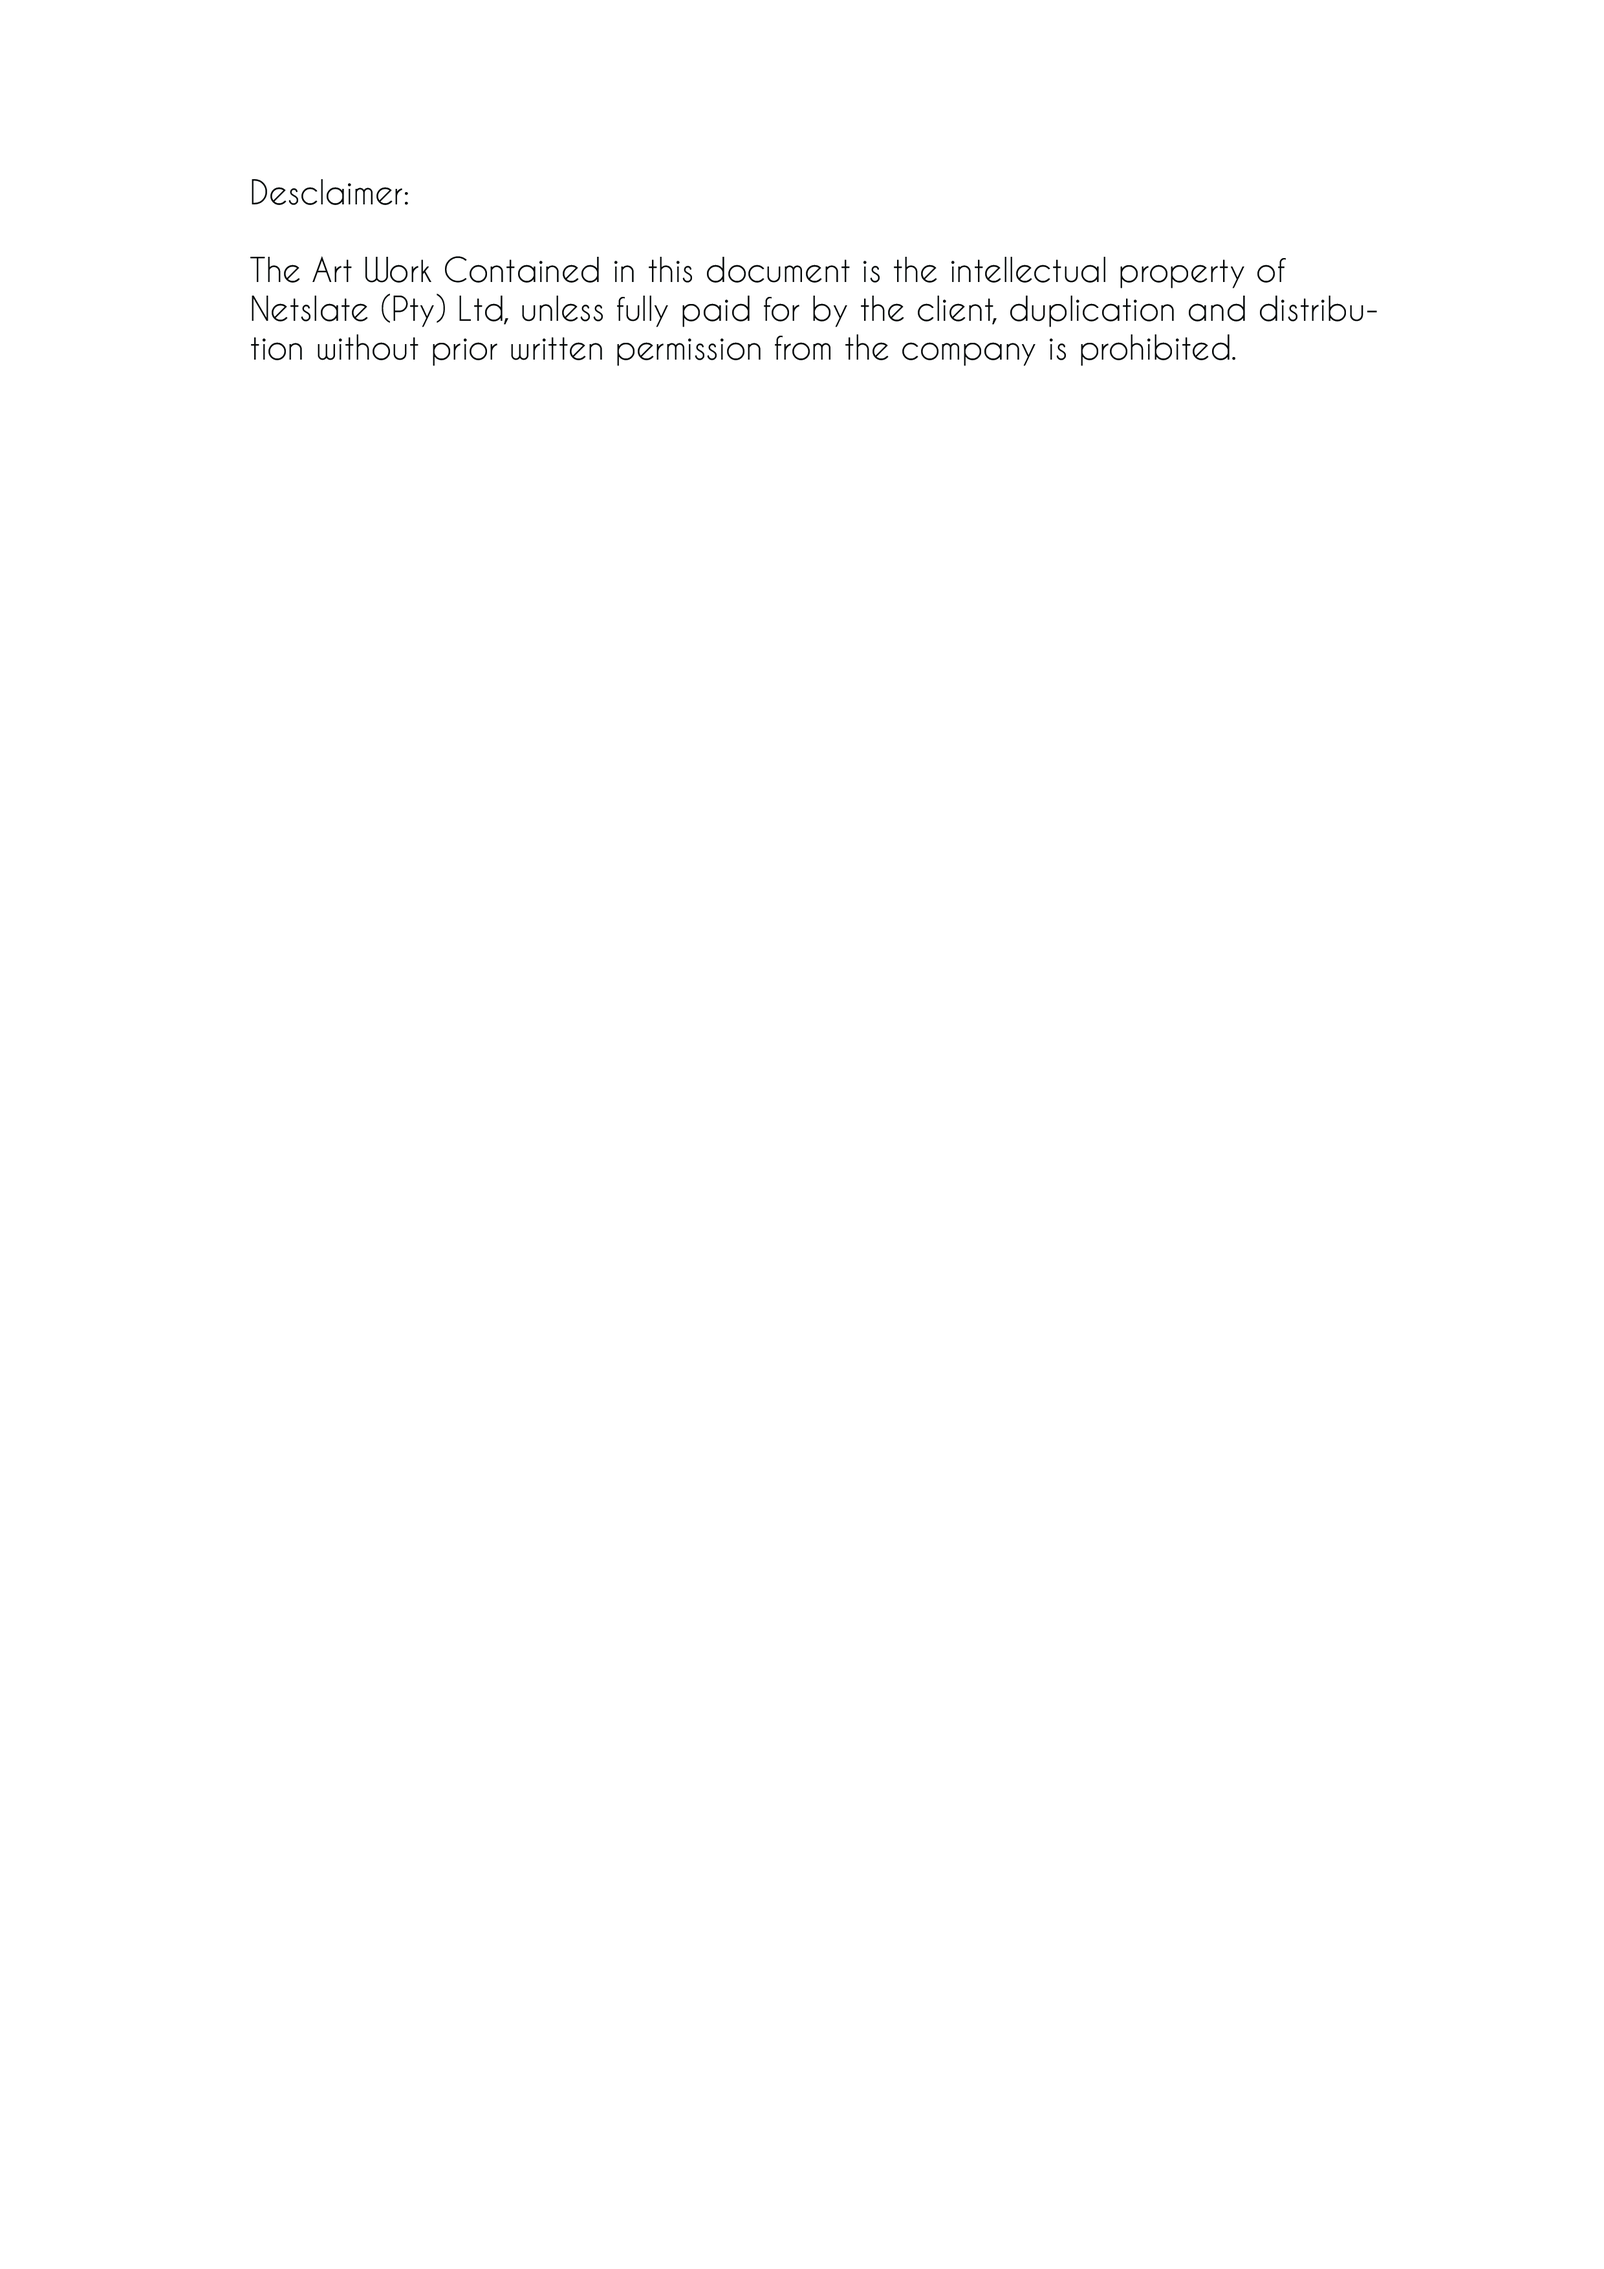
<style>
.page{position:relative;width:1604px;height:2269px;background:#ffffff}
.page>*{position:absolute;margin:0}
.t1{font:7.8px "CaviarDreams";color:#060808}
</style>
<div class="page">
<p class="t1" style="left:250px;top:179px;width:1127px;height:187px">Desclaimer: <br><br>The Art Work Contained in this document is the intellectual property of <br>Netslate (Pty) Ltd, unless fully paid for by the client, duplication and distribution without prior written permission from the company is prohibited.</p>
</div>
